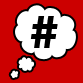
<style>
.page{position:relative;width:83px;height:83px;background:#cc0000}
.page>*{position:absolute;margin:0}
.t1{font:48px "Bauhaus93";letter-spacing:-0.025em;color:#000000}
</style>
<div class="page">
<p class="t1" style="left:30px;top:16px;width:28px;height:32px">#</p>
</div>
